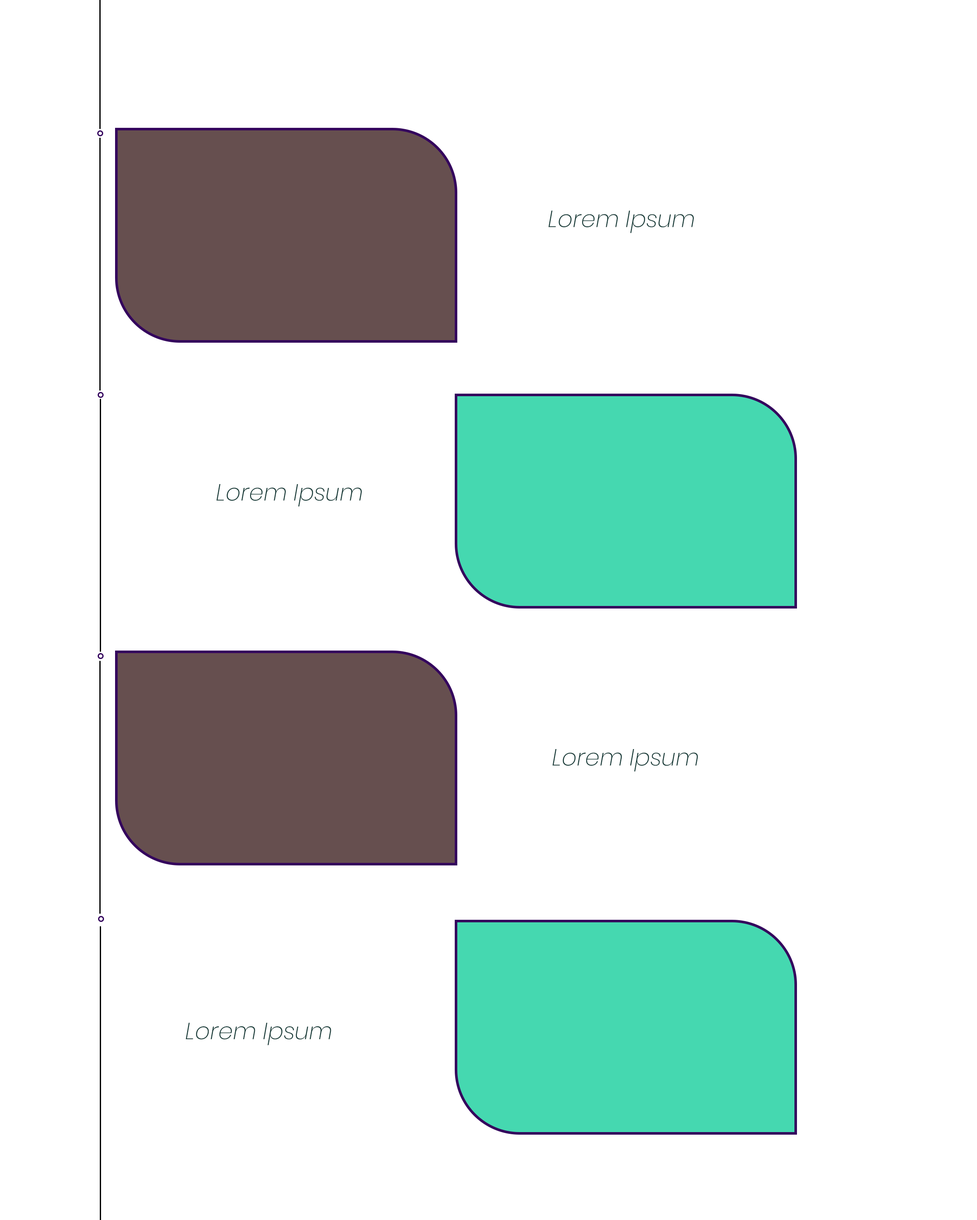
<style>
.page{position:relative;width:977px;height:1220px;background:#ffffff}
.page>*{position:absolute;margin:0}
.t1{font:23.4px "Poppins-ExtraLightItalic";color:#183c39}
</style>
<div class="page">
<p class="t1" style="left:548px;top:211px;width:146px;height:22px">Lorem Ipsum</p>
<p class="t1" style="left:216px;top:484px;width:146px;height:23px">Lorem Ipsum</p>
<p class="t1" style="left:553px;top:749px;width:145px;height:23px">Lorem Ipsum</p>
<p class="t1" style="left:186px;top:1023px;width:145px;height:23px">Lorem Ipsum</p>
</div>
